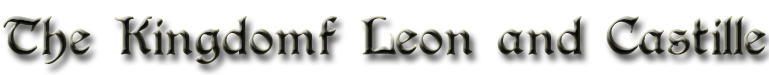
<style>
.page{position:relative;width:769px;height:75px;background:#ffffff}
.page>*{position:absolute;margin:0}
.t1{font:60px "Augusta-Regular"}
</style>
<div class="page">
<p class="t1" style="left:3px;top:16px;width:763px;height:48px">The Kingdomf Leon and Castille</p>
</div>
